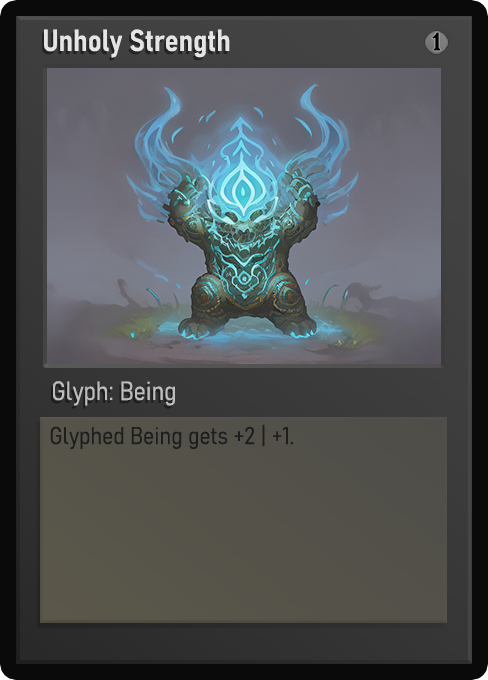
<style>
.page{position:relative;width:488px;height:680px}
.page>*{position:absolute;margin:0}
.t1{font:30px "Bahnschrift-SemiBoldSemiCondensed";color:#f2f2f2;font-weight:bold}
.t2{font:25px "WTRRoycroft";color:#000000;font-weight:bold;scale:1.09 1}
.t3{font:26px "Bahnschrift-LightSemiCondensed";color:#c8c8c8;font-weight:bold}
.t4{font:24px "Bahnschrift-LightSemiCondensed";color:#1e1e1e;font-weight:bold}
</style>
<div class="page">
<p class="t1" style="left:44px;top:29px;width:186px;height:29px;opacity:0.9">Unholy Strength</p>
<p class="t2" style="left:432px;top:32px;width:9px;height:19px">1</p>
<p class="t3" style="left:53px;top:381px;width:122px;height:25px;opacity:0.9">Glyph: Being</p>
<p class="t4" style="left:50px;top:424px;width:243px;height:26px">Glyphed Being gets +2 | +1.</p>
</div>
